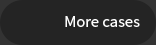
<style>
.page{position:relative;width:156px;height:45px;background:#242424}
.page>*{position:absolute;margin:0}
.t1{font:16.5px "SourceSansPro-Regular";color:#ffffff}
</style>
<div class="page">
<p class="t1" style="left:65px;top:16px;width:75px;height:11px">More cases</p>
</div>
